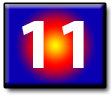
<style>
.page{position:relative;width:111px;height:96px}
.page>*{position:absolute;margin:0}
.t1{font:72px "MyriadPro-Bold";color:#ffffff}
</style>
<div class="page">
<p class="t1" style="left:22px;top:21px;width:62px;height:47px">11</p>
</div>
